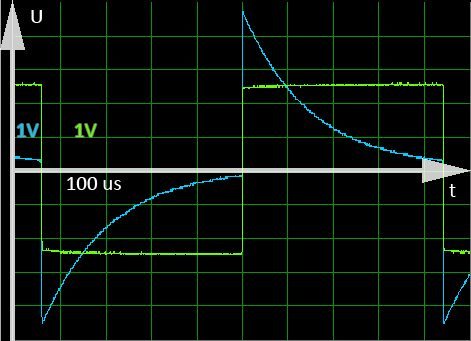
<style>
.page{position:relative;width:471px;height:341px;background:#000000}
.page>*{position:absolute;margin:0}
.t1{font:36px "Calibri";color:#ffffff}
.t2{font:36px "Calibri";color:#00ccff}
.t3{font:36px "Calibri";color:#66ff00}
</style>
<div class="page">
<p class="t1" style="left:31px;top:10px;width:11px;height:13px">U</p>
<p class="t2" style="left:17px;top:124px;width:22px;height:13px">1V</p>
<p class="t3" style="left:75px;top:124px;width:22px;height:13px">1V</p>
<p class="t1" style="left:67px;top:177px;width:54px;height:13px">100 us</p>
<p class="t1" style="left:449px;top:184px;width:7px;height:13px">t</p>
</div>
